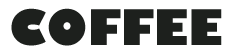
<style>
.page{position:relative;width:240px;height:50px;background:#ffffff}
.page>*{position:absolute;margin:0}
.t1{font:48px "GillSans-UltraBold";color:#1d201d;font-variant:small-caps}
</style>
<div class="page">
<p class="t1" style="left:11px;top:8px;width:211px;height:38px">COFFEE</p>
</div>
